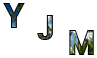
<style>
.page{position:relative;width:97px;height:58px;background:#ffffff}
.page>*{position:absolute;margin:0}
.t1{font:29.2px "HeadlineR-HM"}
</style>
<div class="page">
<p class="t1" style="left:3px;top:3px;width:22px;height:25px">Y</p>
<p class="t1" style="left:37px;top:15px;width:16px;height:25px">J</p>
<p class="t1" style="left:69px;top:30px;width:25px;height:25px">M</p>
</div>
